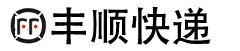
<style>
.page{position:relative;width:240px;height:51px;background:#ffffff}
.page>*{position:absolute;margin:0}
.t1{font:41px "AdobeHeitiStd-Regular";color:#000000}
</style>
<div class="page">
<p class="t1" style="left:51px;top:6px;width:160px;height:39px">丰顺快递</p>
</div>
